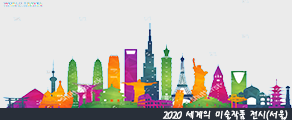
<style>
.page{position:relative;width:292px;height:120px;background:#ebebeb}
.page>*{position:absolute;margin:0}
.t1{font:10px "PyunjiR-HM";letter-spacing:-0.05em;color:#fefefe;font-weight:bold}
</style>
<div class="page">
<p class="t1" style="left:162px;top:110px;width:126px;height:10px">2020 세계의 미술작품 전시(서울)</p>
</div>
